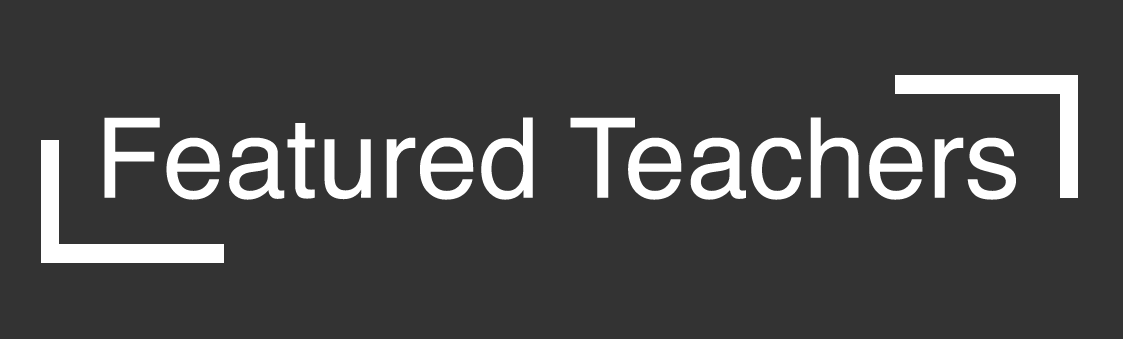
<style>
.page{position:relative;width:1123px;height:339px;background:#333333}
.page>*{position:absolute;margin:0}
.t1{font:111.2px "Helvetica";color:#ffffff}
</style>
<div class="page">
<p class="t1" style="left:104px;top:117px;width:912px;height:83px">Featured Teachers</p>
</div>
